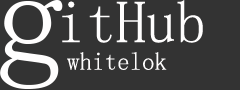
<style>
.page{position:relative;width:240px;height:90px;background:#333333}
.page>*{position:absolute;margin:0}
.t1{font:150px "SimSun";color:#fffefe}
.t2{font:60px "SimSun";color:#fffefe}
.t3{font:25px "SimSun";color:#fffefe}
</style>
<div class="page">
<p class="t1" style="left:0px;top:0px;width:63px;height:89px">g</p>
<p class="t2" style="left:62px;top:0px;width:141px;height:43px">itHub</p>
<p class="t3" style="left:67px;top:52px;width:100px;height:18px">whitelok</p>
</div>
